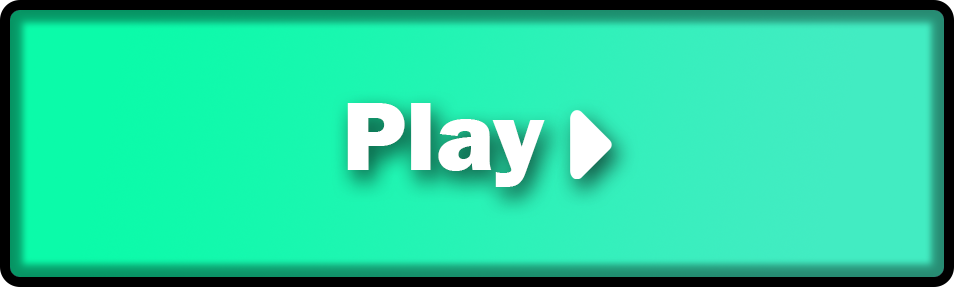
<style>
.page{position:relative;width:954px;height:287px}
.page>*{position:absolute;margin:0}
.t1{font:100px "FranklinGothic-Heavy";color:#ffffff}
</style>
<div class="page">
<p class="t1" style="left:347px;top:103px;width:198px;height:84px">Play</p>
</div>
